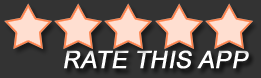
<style>
.page{position:relative;width:261px;height:78px;background:#333333}
.page>*{position:absolute;margin:0}
.t1{font:24px "ArialMT";color:#ffffff;font-weight:bold;font-style:italic}
</style>
<div class="page">
<p class="t1" style="left:64px;top:50px;width:185px;height:19px">RATE THIS APP</p>
</div>
